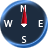
<style>
.page{position:relative;width:48px;height:48px;background:#1d2c3f}
.page>*{position:absolute;margin:0}
.t1{font:10px "MyriadPro-Regular";color:#ffffff}
</style>
<div class="page">
<p class="t1" style="left:20px;top:5px;width:6px;height:7px">N</p>
<p class="t1" style="left:4px;top:20px;width:9px;height:7px">W</p>
<p class="t1" style="left:38px;top:20px;width:5px;height:7px">E</p>
<p class="t1" style="left:21px;top:36px;width:6px;height:7px">S</p>
</div>
